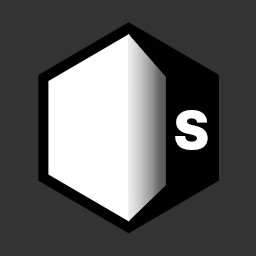
<style>
.page{position:relative;width:256px;height:256px;background:#333333}
.page>*{position:absolute;margin:0}
.t1{font:52.2px "Inter-Black";color:#ffffff}
</style>
<div class="page">
<p class="t1" style="left:175px;top:110px;width:33px;height:40px">S</p>
</div>
